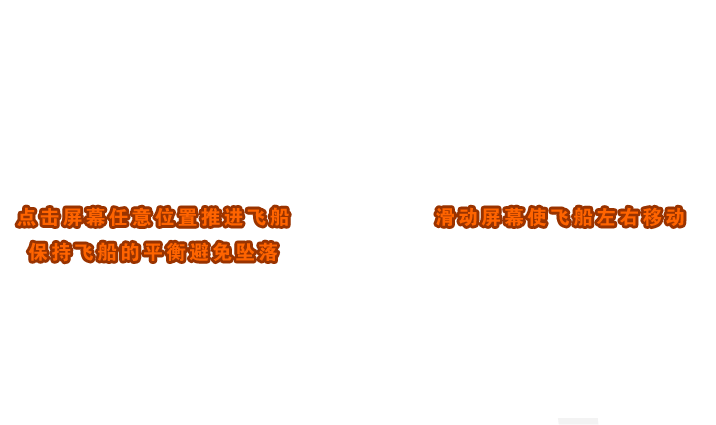
<style>
.page{position:relative;width:716px;height:425px;background:#ffffff}
.page>*{position:absolute;margin:0}
.t1{font:20px "Jdahei";letter-spacing:0.15em;color:#ff6400}
</style>
<div class="page">
<p class="t1" style="left:17px;top:207px;width:272px;height:55px;text-align:center">点击屏幕任意位置推进飞船<br>保持飞船的平衡避免坠落</p>
<p class="t1" style="left:436px;top:207px;width:248px;height:20px">滑动屏幕使飞船左右移动</p>
</div>
